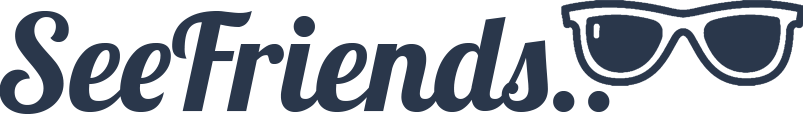
<style>
.page{position:relative;width:803px;height:114px;background:#ffffff}
.page>*{position:absolute;margin:0}
.t1{font:133.3px "Lobster-Regular";color:#2a374b}
</style>
<div class="page">
<p class="t1" style="left:0px;top:11px;width:610px;height:103px">SeeFriends..</p>
</div>
